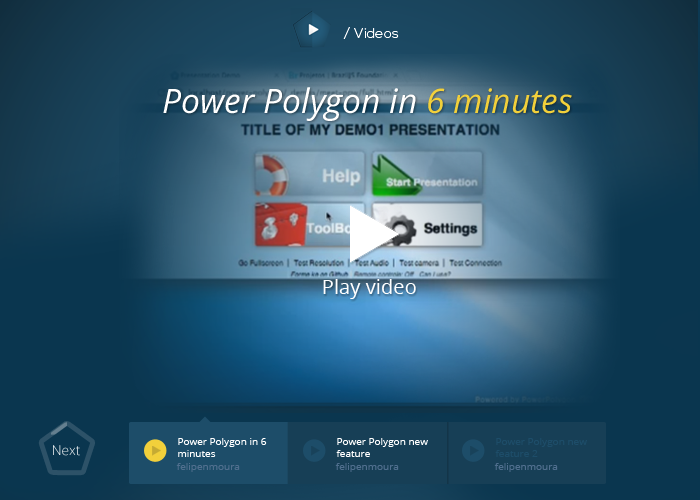
<style>
.page{position:relative;width:700px;height:500px}
.page>*{position:absolute;margin:0}
.t1{font:14px "NexaLight";color:#ffffff}
.t2{font:33.7px "OpenSans-Italic";color:#ffffff}
.t3{font:33.7px "OpenSans-Italic";color:#f2d03b}
.t4{font:20.2px "OpenSans";color:#ffffff}
.t5{font:10px "OpenSans";color:#ffffff}
.t6{font:10px "OpenSans";color:#1d4d69}
.t7{font:13.6px "OpenSans-Light"}
.t8{font:10px "OpenSans";color:#506f8e}
</style>
<div class="page">
<p class="t1" style="left:343px;top:27px;width:56px;height:12px">/ Videos</p>
<p class="t2" style="left:163px;top:87px;width:409px;height:34px">Power Polygon in <span class="t3">6 minutes</span></p>
<p class="t4" style="left:323px;top:279px;width:93px;height:20px">Play video</p>
<p class="t5" style="left:178px;top:438px;width:89px;height:19px">Power Polygon in 6 minutes</p>
<p class="t5" style="left:336px;top:438px;width:92px;height:19px">Power Polygon new feature</p>
<p class="t6" style="left:495px;top:438px;width:92px;height:19px">Power Polygon new feature 2</p>
<p class="t7" style="left:53px;top:445px;width:27px;height:11px">Next</p>
<p class="t8" style="left:176px;top:463px;width:64px;height:9px">felipenmoura</p>
<p class="t8" style="left:335px;top:463px;width:64px;height:9px">felipenmoura</p>
<p class="t8" style="left:494px;top:463px;width:64px;height:9px">felipenmoura</p>
</div>
